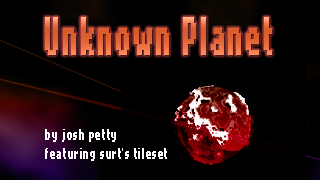
<style>
.page{position:relative;width:320px;height:180px;background:#000000}
.page>*{position:absolute;margin:0}
.t1{font:43.2px "NokiaCellphoneFC-Small";letter-spacing:0.075em;color:#e4683a;scale:0.48 1}
.t2{font:43.2px "PressStartReg";letter-spacing:0.075em;color:#e4683a;scale:0.48 1}
.t3{font:12.5px/48px "NokiaCellphoneFC-Small";letter-spacing:0.075em;color:#ffffff;scale:0.6 1}
.t4{font:15px/48px "NokiaCellphoneFC-Small";letter-spacing:0.075em;color:#ffffff;scale:0.6 1}
</style>
<div class="page">
<p class="t1" style="left:45px;top:17px;width:227px;height:38px"><span class="t2"><br></span>Unknown Planet</p>
<p class="t1" style="left:45px;top:17px;width:227px;height:38px"><span class="t2"><br></span>Unknown Planet</p>
<p class="t3" style="left:45px;top:129px;width:71px;height:13px">by josh petty<br><span class="t4"><br>feat</span></p>
<p class="t3" style="left:45px;top:148px;width:122px;height:13px">featuring surt’s tileset<br><span class="t4"><br>feat</span></p>
</div>
